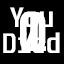
<style>
.page{position:relative;width:64px;height:64px;background:#000000}
.page>*{position:absolute;margin:0}
.t1{font:24px/26px "Unispace-Bold";color:#ffffff}
.t2{font:48px "Unispace-Bold";color:#ffffff}
</style>
<div class="page">
<p class="t1" style="left:3px;top:7px;width:57px;height:46px;text-align:center">You<br>Died</p>
<p class="t2" style="left:20px;top:12px;width:26px;height:39px">0</p>
</div>
